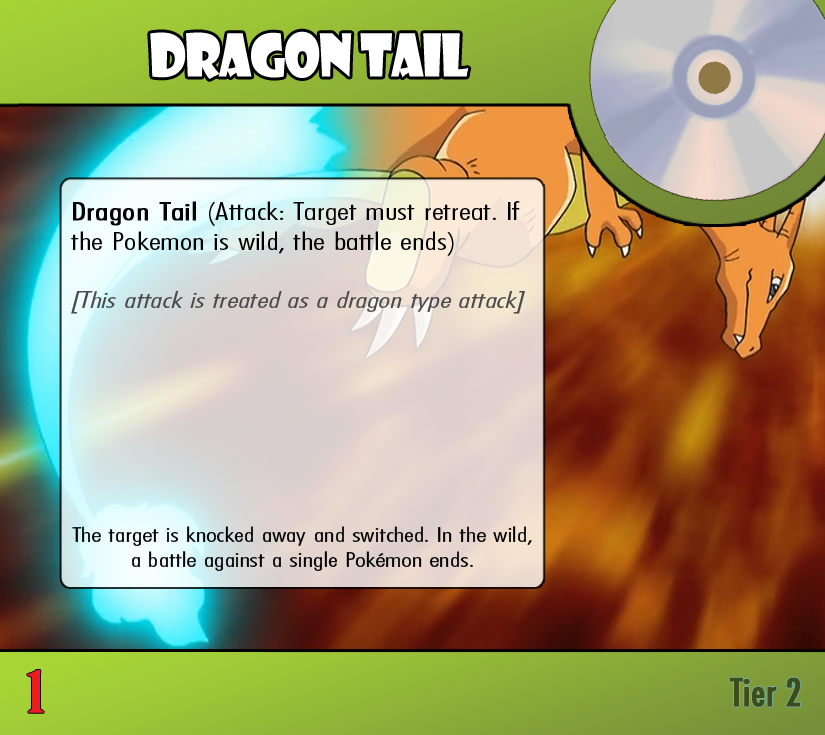
<style>
.page{position:relative;width:825px;height:735px}
.page>*{position:absolute;margin:0}
.t1{font:57.4px "ShowcardGothic-Reg";letter-spacing:-0.025em;color:#ffffff;scale:0.91 1}
.t2{font:25px "FuturaCondensedBQ-Light";color:#000000;scale:1.5 1}
.t3{font:25px "FuturaCondensedBQ-Light";color:#000000;font-weight:bold;scale:1.5 1}
.t4{font:23.3px "FuturaCondensedBQ-Light";color:#4c4b4b;font-style:italic;scale:1.5 1}
.t5{font:20.8px "FuturaCondensedBQ-Light";color:#000000;scale:1.5 1}
.t6{font:55.6px "BirchStd";color:#ed1c24;font-weight:bold;scale:1.5 1}
.t7{font:37.5px "Futura-Condensed-Normal";color:#3e4c1c;font-weight:bold}
</style>
<div class="page">
<p class="t1" style="left:150px;top:31px;width:319px;height:48px">Dragon Tail</p>
<p class="t2" style="left:71px;top:201px;width:454px;height:113px"><span class="t3">Dragon Tail </span>(Attack: Target must retreat. If the Pokemon is wild, the battle ends)<br><br><span class="t4">[This attack is treated as a dragon type attack]</span></p>
<p class="t5" style="left:72px;top:526px;width:460px;height:45px;text-align:center">The target is knocked away and switched. In the wild, a battle against a single Pokémon ends.</p>
<p class="t6" style="left:27px;top:670px;width:17px;height:43px">1</p>
<p class="t7" style="left:729px;top:677px;width:72px;height:30px">Tier 2</p>
</div>
